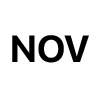
<style>
.page{position:relative;width:100px;height:100px;background:#ffffff}
.page>*{position:absolute;margin:0}
.t1{font:37.5px "SFProDisplay-Bold";color:#000000}
</style>
<div class="page">
<p class="t1" style="left:12px;top:35px;width:77px;height:28px">NOV</p>
</div>
